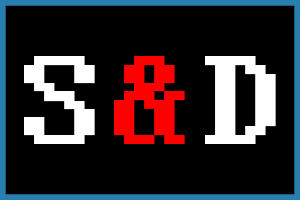
<style>
.page{position:relative;width:300px;height:200px;background:#000000}
.page>*{position:absolute;margin:0}
.t1{font:139.6px "PerfectDOSVGA437Win";color:#ffffff;scale:1.15 1}
.t2{font:139.6px "PerfectDOSVGA437Win";color:#ff0000;scale:1.15 1}
</style>
<div class="page">
<p class="t1" style="left:24px;top:56px;width:252px;height:88px">S<span class="t2">&amp;</span>D</p>
</div>
